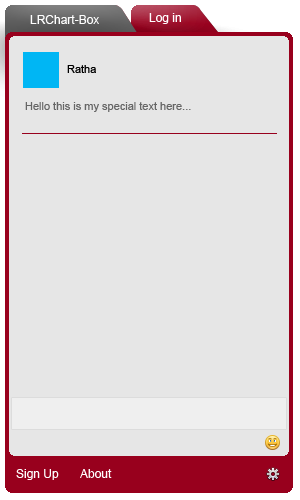
<style>
.page{position:relative;width:300px;height:500px;background:#e6e6e6}
.page>*{position:absolute;margin:0}
.t1{font:12px "ArialMT";color:#fefefe}
.t2{font:11px "ArialMT";color:#000000}
.t3{font:11px "ArialMT";color:#666666}
</style>
<div class="page">
<p class="t1" style="left:30px;top:15px;width:69px;height:9px">LRChart-Box</p>
<p class="t1" style="left:149px;top:13px;width:32px;height:11px">Log in</p>
<p class="t2" style="left:67px;top:65px;width:29px;height:8px">Ratha</p>
<p class="t3" style="left:25px;top:102px;width:166px;height:10px">Hello this is my special text here...</p>
<p class="t1" style="left:16px;top:469px;width:43px;height:11px">Sign Up</p>
<p class="t1" style="left:80px;top:469px;width:32px;height:9px">About</p>
</div>
